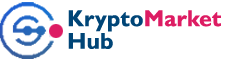
<style>
.page{position:relative;width:225px;height:61px;background:#ffffff}
.page>*{position:absolute;margin:0}
.t1{font:23px/22.6px "GillSansMT-Bold";letter-spacing:0.005em;color:#004577}
.t2{font:23px/22.6px "GillSansMT-Bold";letter-spacing:0.005em;color:#dd1c63}
</style>
<div class="page">
<p class="t1" style="left:68px;top:10px;width:153px;height:39px">Krypto<span class="t2">Market<br></span>Hub</p>
</div>
